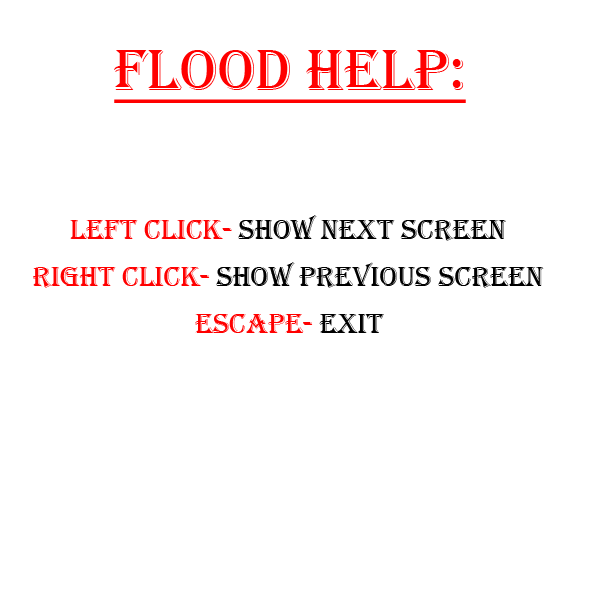
<style>
.page{position:relative;width:600px;height:600px;background:#ffffff}
.page>*{position:absolute;margin:0}
.t1{font:60px "Algerian";color:#ff0000;text-decoration:underline}
.t2{font:29px "Algerian";color:#000000}
.t3{font:29px "Algerian";color:#ff0000}
</style>
<div class="page">
<p class="t1" style="left:114px;top:50px;width:352px;height:53px">FLood help:</p>
<p class="t2" style="left:70px;top:215px;width:436px;height:26px"><span class="t3">Left click- </span>show next Screen</p>
<p class="t2" style="left:33px;top:262px;width:511px;height:26px"><span class="t3">Right click- </span>show previous Screen</p>
<p class="t3" style="left:195px;top:314px;width:189px;height:19px">escape-<span class="t2"> exit</span></p>
</div>
